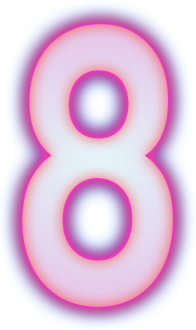
<style>
.page{position:relative;width:196px;height:330px}
.page>*{position:absolute;margin:0}
.t1{font:396px "AGBuchRoundedCondensedBQ-BoldOutline";letter-spacing:0.025em;scale:0.76 1}
</style>
<div class="page">
<p class="t1" style="left:22px;top:24px;width:151px;height:283px">8</p>
<p class="t1" style="left:22px;top:24px;width:151px;height:283px">8</p>
</div>
